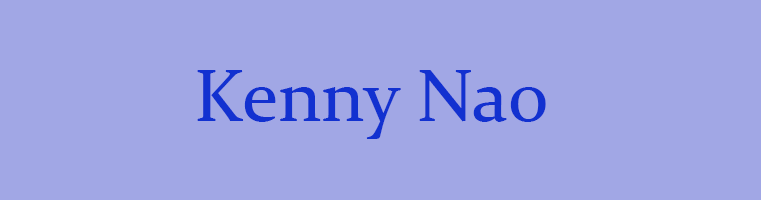
<style>
.page{position:relative;width:761px;height:200px;background:#a1a7e5}
.page>*{position:absolute;margin:0}
.t1{font:75px "Constantia";color:#1231d0}
</style>
<div class="page">
<p class="t1" style="left:197px;top:70px;width:349px;height:69px">Kenny Nao</p>
</div>
